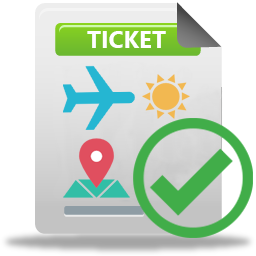
<style>
.page{position:relative;width:256px;height:256px;background:#ffffff}
.page>*{position:absolute;margin:0}
.t1{font:24px "SegoeUI-Bold";color:#ffffff}
</style>
<div class="page">
<p class="t1" style="left:87px;top:31px;width:79px;height:17px">TICKET</p>
</div>
